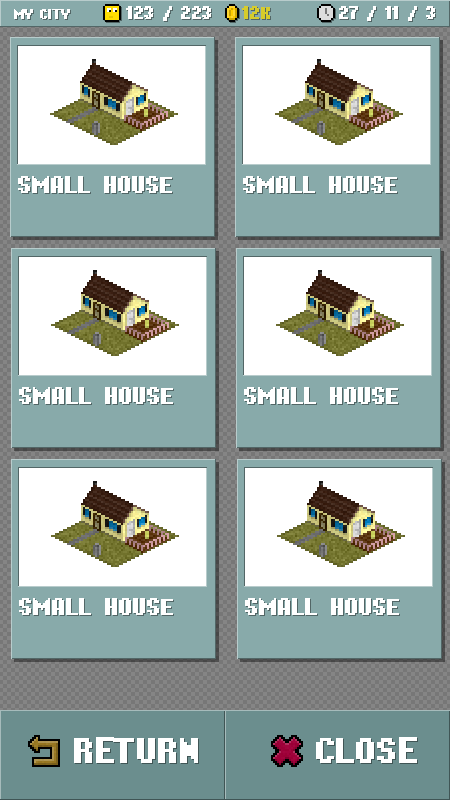
<style>
.page{position:relative;width:450px;height:800px;background:#ffffff}
.page>*{position:absolute;margin:0}
.t1{font:18px "Hardpixel";color:#ffffff;text-transform:uppercase}
.t2{font:18px "Hardpixel";color:#d6cc2c;text-transform:uppercase}
.t3{font:14px "Hardpixel";color:#ffffff;text-transform:uppercase}
.t4{font:24px "Hardpixel";color:#ffffff;text-transform:uppercase}
.t5{font:36px "Hardpixel";color:#ffffff;text-transform:uppercase}
</style>
<div class="page">
<p class="t1" style="left:126px;top:6px;width:85px;height:15px"><span class="t2"> </span>123 / 223</p>
<p class="t2" style="left:242px;top:6px;width:28px;height:13px">12k</p>
<p class="t1" style="left:339px;top:6px;width:96px;height:15px">27 / 11 / 3</p>
<p class="t3" style="left:14px;top:9px;width:56px;height:10px">My City</p>
<p class="t4" style="left:18px;top:176px;width:154px;height:17px">Small House</p>
<p class="t4" style="left:243px;top:176px;width:154px;height:17px">Small House</p>
<p class="t4" style="left:19px;top:387px;width:154px;height:17px">Small House</p>
<p class="t4" style="left:244px;top:387px;width:154px;height:17px">Small House</p>
<p class="t4" style="left:19px;top:598px;width:154px;height:17px">Small House</p>
<p class="t4" style="left:245px;top:598px;width:154px;height:17px">Small House</p>
<p class="t5" style="left:74px;top:737px;width:124px;height:26px">return</p>
<p class="t5" style="left:316px;top:737px;width:101px;height:26px">close</p>
</div>
